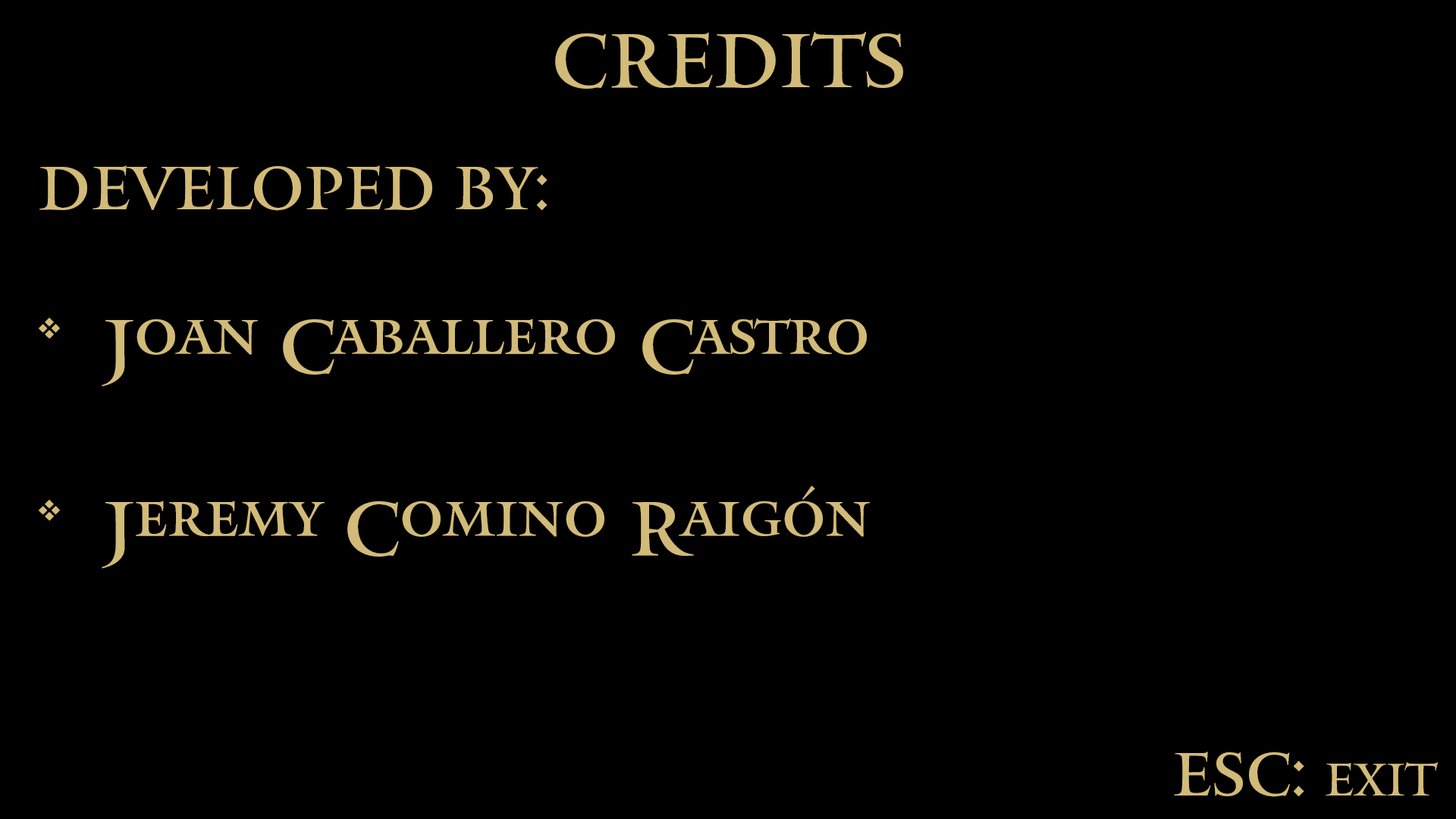
<style>
.page{position:relative;width:1456px;height:819px;background:#000000}
.page>*{position:absolute;margin:0}
.t1{font:75.8px "Mantinia";color:#d2ba78}
.t2{font:60.7px "Mantinia";color:#d2ba78}
.t3{font:45.5px "Mantinia";color:#d2ba78}
</style>
<div class="page">
<p class="t1" style="left:555px;top:32px;width:348px;height:57px">CREDITS</p>
<p class="t1" style="left:39px;top:165px;width:831px;height:404px"><span class="t2">DEVELOPED BY:<br><br></span>*  Joan Caballero Castro<br><br>*  Jeremy Comino Raigón</p>
<p class="t2" style="left:1174px;top:751px;width:265px;height:46px">ESC: <span class="t3">EXIT</span></p>
</div>
